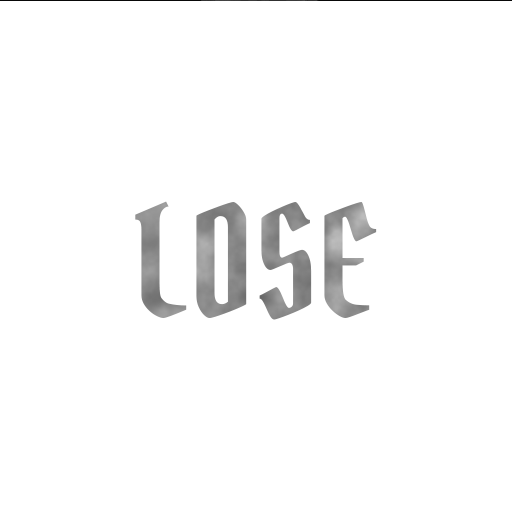
<style>
.page{position:relative;width:512px;height:512px;background:#ffffff}
.page>*{position:absolute;margin:0}
.t1{font:150px "Bokor-Regular";color:#8c8c8c}
</style>
<div class="page">
<p class="t1" style="left:135px;top:200px;width:242px;height:119px">LOSE</p>
</div>
